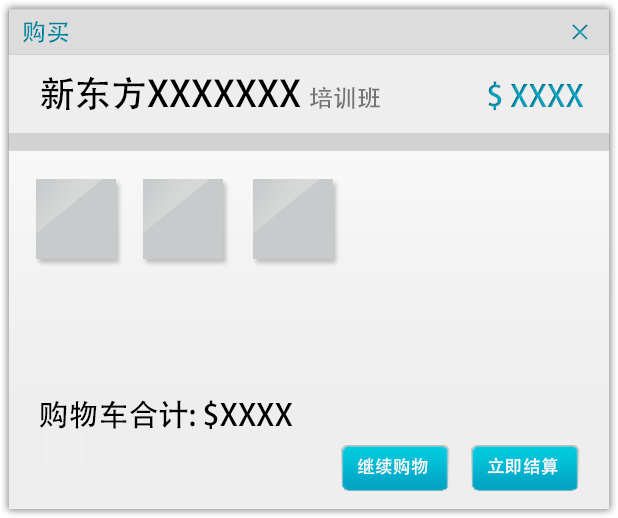
<style>
.page{position:relative;width:618px;height:518px;background:#eeeeee}
.page>*{position:absolute;margin:0}
.t1{font:24px "AdobeHeitiStd-Regular";color:#01849e}
.t2{font:24px "AdobeHeitiStd-Regular"}
.t3{font:36px "AdobeHeitiStd-Regular";color:#000000}
.t4{font:24px "AdobeHeitiStd-Regular";color:#767575}
.t5{font:30px "AdobeHeitiStd-Regular";color:#019bb9}
.t6{font:30px "AdobeHeitiStd-Regular";color:#000000}
.t7{font:18px "AdobeHeitiStd-Regular";color:#fcfcfc}
</style>
<div class="page">
<p class="t1" style="left:23px;top:21px;width:45px;height:22px">购买</p>
<p class="t1" style="left:23px;top:21px;width:45px;height:22px">购买</p>
<p class="t2" style="left:572px;top:24px;width:16px;height:16px">×</p>
<p class="t2" style="left:572px;top:24px;width:16px;height:16px">×</p>
<p class="t3" style="left:40px;top:76px;width:340px;height:34px">新东方XXXXXXX <span class="t4">培训班</span></p>
<p class="t5" style="left:488px;top:81px;width:96px;height:29px">$ XXXX</p>
<p class="t6" style="left:39px;top:400px;width:254px;height:29px">购物车合计: $XXXX</p>
<p class="t7" style="left:357px;top:457px;width:71px;height:18px">继续购物</p>
<p class="t7" style="left:487px;top:457px;width:71px;height:18px">立即结算</p>
</div>
